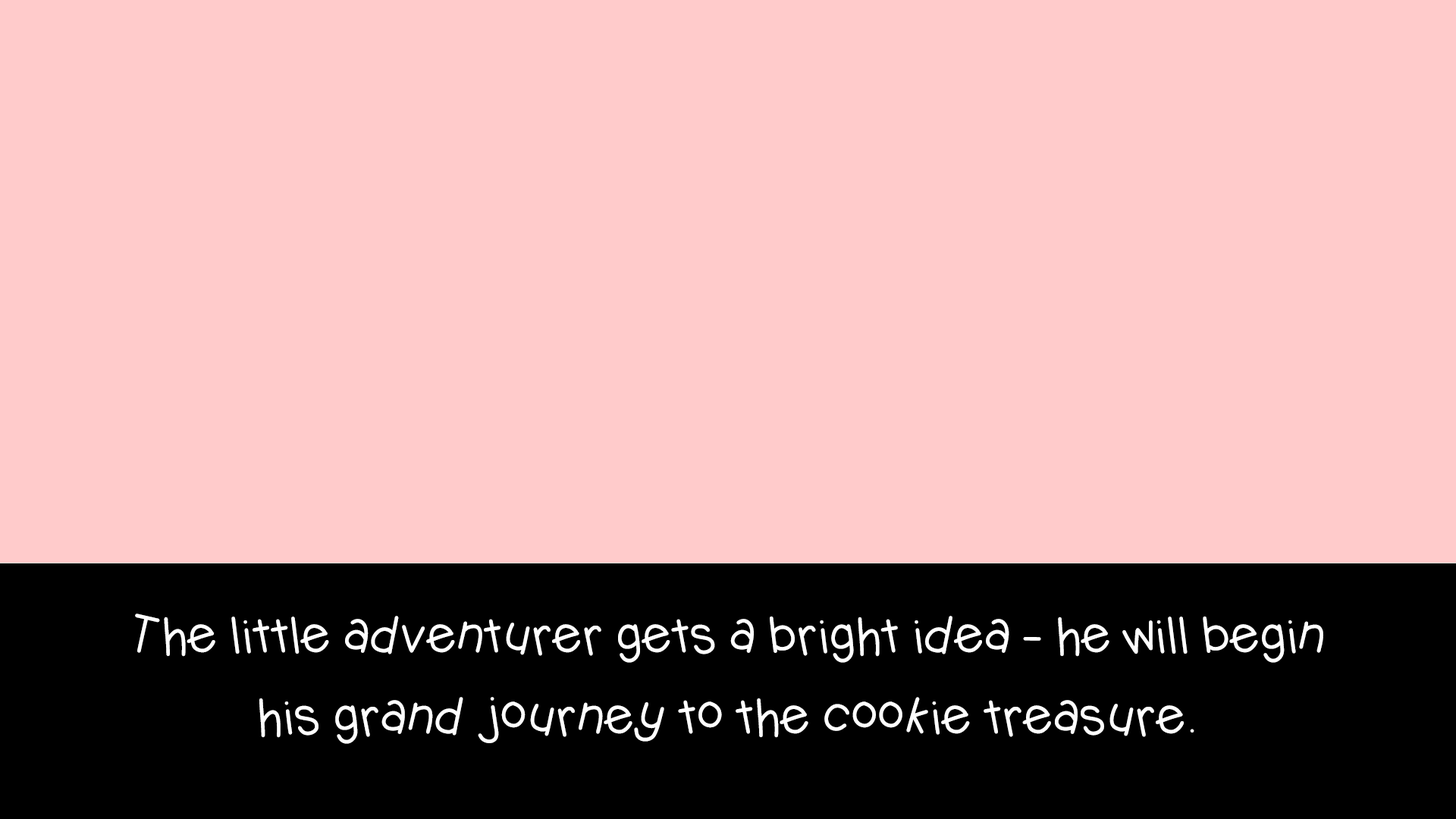
<style>
.page{position:relative;width:1456px;height:819px;background:#ffcbcb}
.page>*{position:absolute;margin:0}
.t1{font:49.1px/81.1px "KBJellybean";letter-spacing:-0.04em;color:#ffffff}
</style>
<div class="page">
<p class="t1" style="left:135px;top:613px;width:1188px;height:131px;text-align:center">The little adventurer gets a bright idea - he will begin<br>his grand journey to the cookie treasure.</p>
</div>
